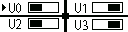
<style>
.page{position:relative;width:128px;height:32px;background:#ffffff}
.page>*{position:absolute;margin:0}
.t1{font:12px "AdobeHeitiStd-Regular";color:#000500}
</style>
<div class="page">
<p class="t1" style="left:9px;top:3px;width:12px;height:10px">U0</p>
<p class="t1" style="left:75px;top:3px;width:11px;height:10px">U1</p>
<p class="t1" style="left:9px;top:19px;width:12px;height:10px">U2</p>
<p class="t1" style="left:75px;top:20px;width:13px;height:10px">U3</p>
</div>
